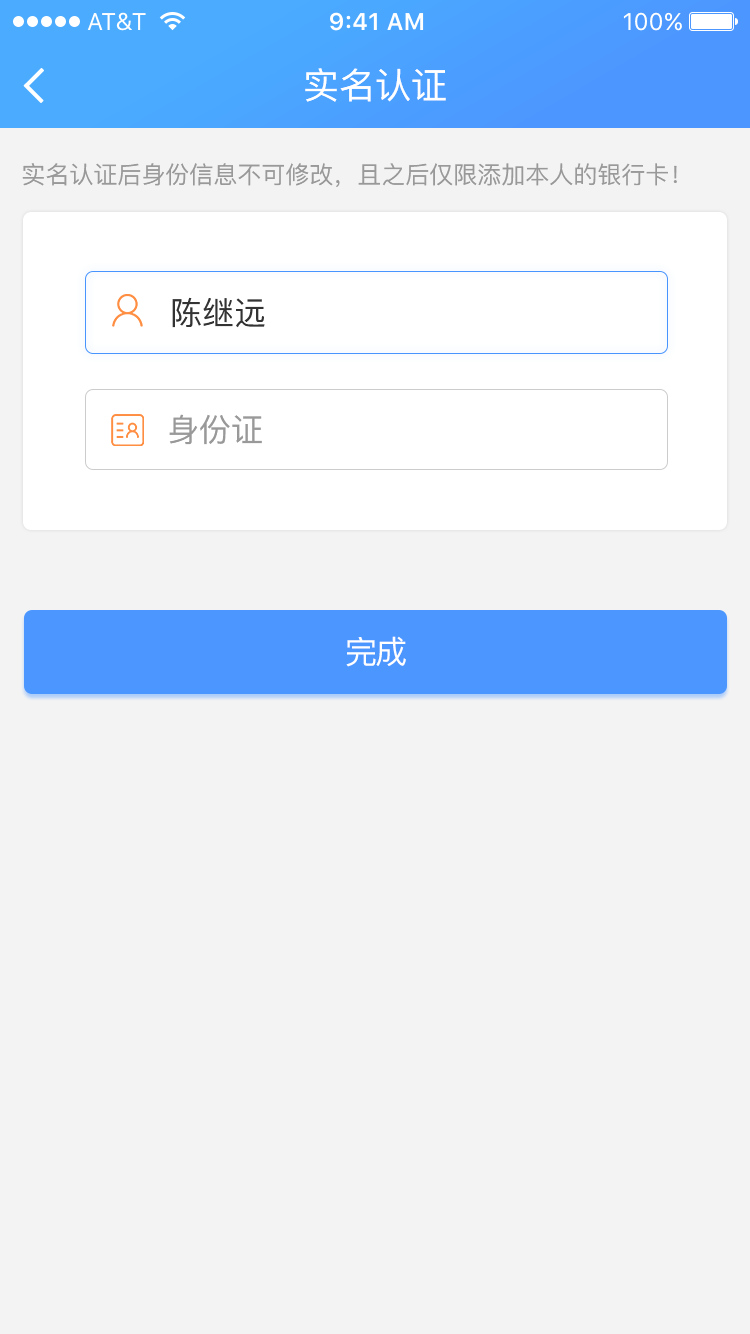
<style>
.page{position:relative;width:750px;height:1334px;background:#f3f3f3}
.page>*{position:absolute;margin:0}
.t1{font:36px "PingFang-SC-Medium";color:#ffffff}
.t2{font:24px "PingFang-SC-Medium";color:#999999}
.t3{font:32px "PingFang-SC-Medium";color:#333333}
.t4{font:32px "PingFang-SC-Medium";color:#999999}
.t5{font:32px "PingFang-SC-Medium";letter-spacing:-0.06em;color:#ffffff}
</style>
<div class="page">
<p class="t1" style="left:305px;top:68px;width:141px;height:34px">实名认证</p>
<p class="t2" style="left:22px;top:163px;width:655px;height:24px">实名认证后身份信息不可修改，且之后仅限添加本人的银行卡！</p>
<p class="t3" style="left:172px;top:297px;width:93px;height:31px">陈继远</p>
<p class="t4" style="left:169px;top:414px;width:93px;height:31px">身份证</p>
<p class="t5" style="left:346px;top:636px;width:60px;height:31px">完成</p>
</div>
